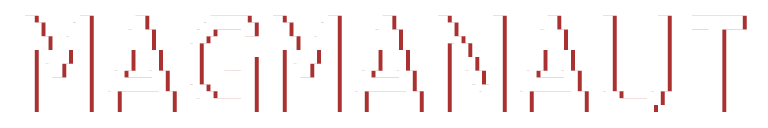
<style>
.page{position:relative;width:768px;height:128px;background:#ffffff}
.page>*{position:absolute;margin:0}
.t1{font:110px "Terminal";color:#ffffff}
</style>
<div class="page">
<p class="t1" style="left:25px;top:15px;width:722px;height:97px">MAGMANAUT</p>
</div>
